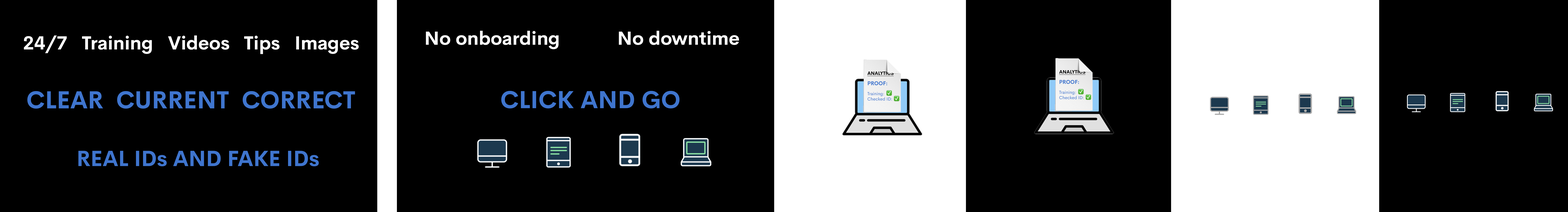
<style>
.page{position:relative;width:1568px;height:212px;background:#000000}
.page>*{position:absolute;margin:0}
.t1{font:18.7px "CerebriSans-Bold";color:#ffffff}
.t2{font:24.2px "CerebriSans-Bold";color:#3f75ce}
.t3{font:21.5px "CerebriSans-Bold";color:#3f75ce}
</style>
<div class="page">
<p class="t1" style="left:24px;top:35px;width:335px;height:19px">24/7   Training   Videos   Tips   Images</p>
<p class="t1" style="left:426px;top:31px;width:133px;height:18px">No onboarding</p>
<p class="t1" style="left:619px;top:31px;width:120px;height:14px">No downtime</p>
<p class="t2" style="left:27px;top:91px;width:328px;height:18px">CLEAR  CURRENT  CORRECT</p>
<p class="t2" style="left:501px;top:91px;width:178px;height:18px">CLICK AND GO</p>
<p class="t3" style="left:78px;top:151px;width:241px;height:16px">REAL IDs AND FAKE IDs</p>
</div>
